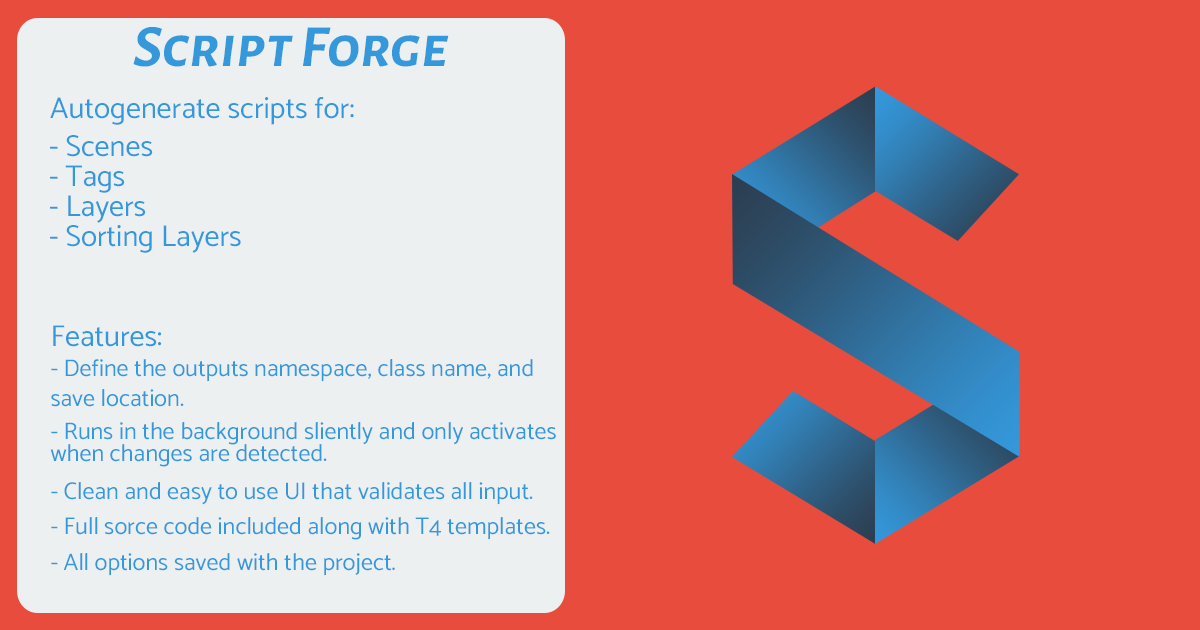
<style>
.page{position:relative;width:1200px;height:630px;background:#e74c3c}
.page>*{position:absolute;margin:0}
.t1{font:60px "AlegreyaSansSC-BoldItalic";color:#3498db}
.t2{font:30px "Catamaran-Regular";color:#3498db}
.t3{font:24px "Catamaran-Regular";color:#3498db}
</style>
<div class="page">
<p class="t1" style="left:133px;top:27px;width:316px;height:40px">Script Forge</p>
<p class="t2" style="left:50px;top:97px;width:304px;height:28px">Autogenerate scripts for:</p>
<p class="t2" style="left:50px;top:135px;width:103px;height:22px">- Scenes</p>
<p class="t2" style="left:50px;top:165px;width:75px;height:28px">- Tags</p>
<p class="t2" style="left:50px;top:195px;width:96px;height:28px">- Layers</p>
<p class="t2" style="left:50px;top:225px;width:191px;height:28px">- Sorting Layers</p>
<p class="t2" style="left:53px;top:325px;width:109px;height:22px">Features:</p>
<p class="t3" style="left:51px;top:359px;width:482px;height:23px">- Define the outputs namespace, class name, and</p>
<p class="t3" style="left:51px;top:389px;width:133px;height:18px">save location.</p>
<p class="t3" style="left:51px;top:422px;width:505px;height:23px">- Runs in the background sliently and only activates</p>
<p class="t3" style="left:50px;top:444px;width:277px;height:23px">when changes are detected.</p>
<p class="t3" style="left:51px;top:482px;width:482px;height:23px">- Clean and easy to use UI that validates all input.</p>
<p class="t3" style="left:51px;top:517px;width:499px;height:23px">- Full sorce code included along with T4 templates.</p>
<p class="t3" style="left:51px;top:553px;width:344px;height:23px">- All options saved with the project.</p>
</div>
